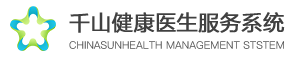
<style>
.page{position:relative;width:300px;height:60px;background:#ffffff}
.page>*{position:absolute;margin:0}
.t1{font:21.7px "FZLTHJW--GB1-0";letter-spacing:-0.02em;color:#404040;font-weight:bold}
.t2{font:10.4px "PingFang-SC-Medium";color:#555555;text-transform:uppercase}
</style>
<div class="page">
<p class="t1" style="left:69px;top:12px;width:216px;height:21px">千山健康医生服务系统</p>
<p class="t2" style="left:69px;top:41px;width:215px;height:8px">chinasunhealth management ststem</p>
</div>
